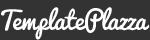
<style>
.page{position:relative;width:150px;height:40px;background:#333333}
.page>*{position:absolute;margin:0}
.t1{font:24.8px "Pacifico";color:#ffffff}
</style>
<div class="page">
<p class="t1" style="left:1px;top:7px;width:149px;height:33px">TemplatePlazza</p>
</div>
